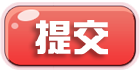
<style>
.page{position:relative;width:140px;height:73px;background:#ffffff}
.page>*{position:absolute;margin:0}
.t1{font:36px "By-JOSSQ-DMF-in-BeiJing";letter-spacing:0.05em;color:#ffffff}
</style>
<div class="page">
<p class="t1" style="left:35px;top:20px;width:73px;height:35px">提交</p>
</div>
